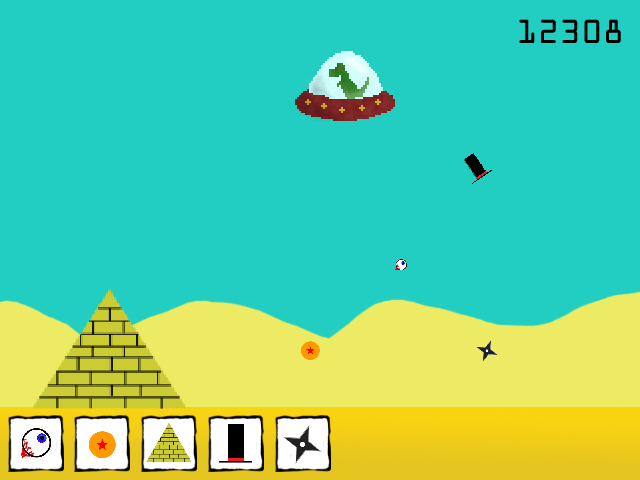
<style>
.page{position:relative;width:640px;height:480px;background:#22cdc1}
.page>*{position:absolute;margin:0}
.t1{font:30px "OCRAStd";color:#000000}
</style>
<div class="page">
<p class="t1" style="left:519px;top:19px;width:102px;height:24px">12308</p>
</div>
